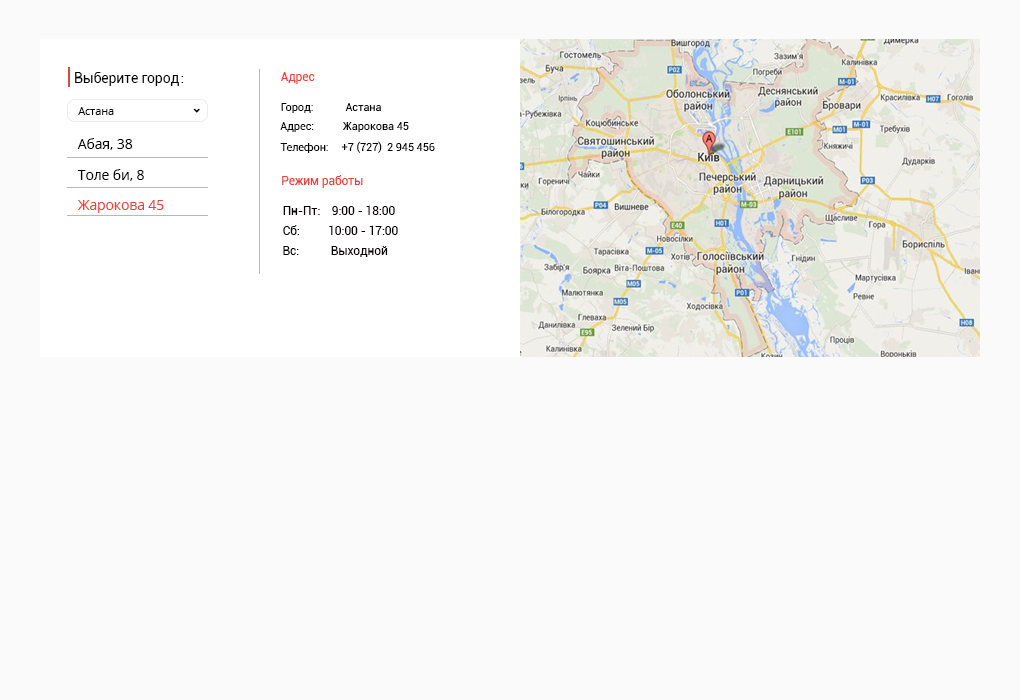
<style>
.page{position:relative;width:1020px;height:700px;background:#fafafa}
.page>*{position:absolute;margin:0}
.t1{font:14px "Roboto-Regular";letter-spacing:-0.01em;color:#050404}
.t2{font:12px "Roboto-Regular";letter-spacing:-0.01em;color:#de483d}
.t3{font:11px "OpenSans";letter-spacing:-0.01em;color:#050404}
.t4{font:11px "Roboto-Regular";letter-spacing:-0.01em;color:#050404}
.t5{font:14px "OpenSans";letter-spacing:-0.01em;color:#050404}
.t6{font:14px "OpenSans";letter-spacing:-0.01em;color:#de483d}
.t7{font:12px "Roboto-Regular";letter-spacing:-0.01em;color:#060101}
</style>
<div class="page">
<p class="t1" style="left:75px;top:72px;width:104px;height:14px">Выберите город</p>
<p class="t1" style="left:181px;top:76px;width:3px;height:7px">:</p>
<p class="t2" style="left:281px;top:72px;width:34px;height:12px">Адрес</p>
<p class="t3" style="left:78px;top:107px;width:36px;height:8px">Астана</p>
<p class="t4" style="left:281px;top:103px;width:100px;height:10px">Город:             Астана</p>
<p class="t4" style="left:280px;top:122px;width:129px;height:10px">Адрес:           Жарокова 45</p>
<p class="t5" style="left:77px;top:138px;width:56px;height:12px">Абая, 38</p>
<p class="t4" style="left:280px;top:141px;width:155px;height:12px">Телефон:     +7 (727)  2 945 456</p>
<p class="t5" style="left:77px;top:169px;width:67px;height:12px">Толе би, 8</p>
<p class="t2" style="left:282px;top:175px;width:81px;height:13px">Режим работы</p>
<p class="t6" style="left:77px;top:200px;width:87px;height:13px">Жарокова 45</p>
<p class="t7" style="left:283px;top:205px;width:112px;height:10px">Пн-Пт:    9:00 - 18:00</p>
<p class="t7" style="left:283px;top:225px;width:115px;height:10px">Сб:          10:00 - 17:00</p>
<p class="t7" style="left:283px;top:246px;width:105px;height:11px">Вс:           Выходной</p>
</div>
